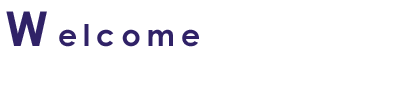
<style>
.page{position:relative;width:400px;height:100px;background:#ffffff}
.page>*{position:absolute;margin:0}
.t1{font:30px "CenturyGothic-Bold";letter-spacing:0.2em;color:#302267}
.t2{font:48px "CenturyGothic-Bold";letter-spacing:0.2em;color:#302267}
</style>
<div class="page">
<p class="t1" style="left:6px;top:11px;width:193px;height:36px"><span class="t2">W</span>elcome</p>
</div>
